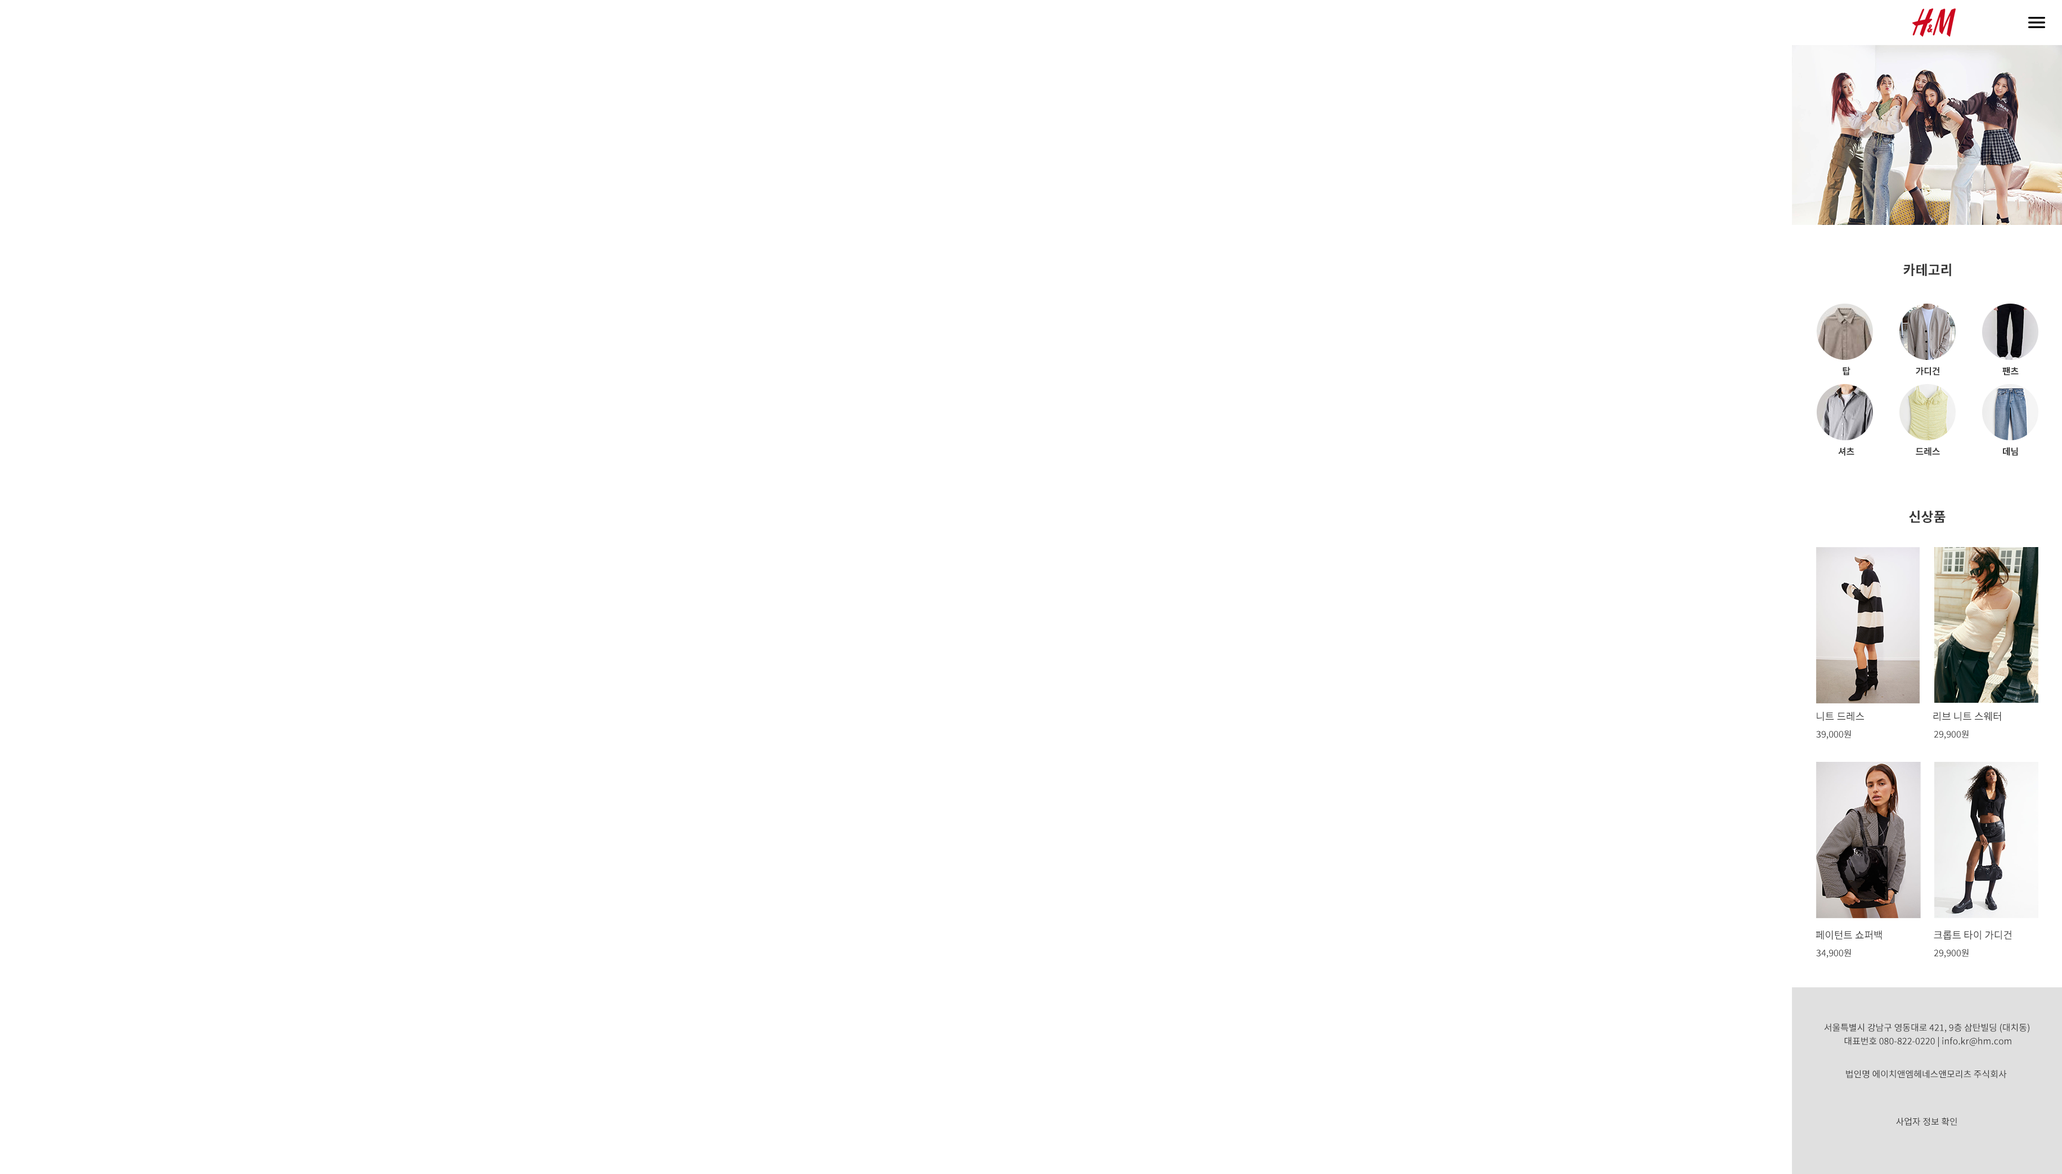
<style>
.page{position:relative;width:2062px;height:1174px;background:#ffffff}
.page>*{position:absolute;margin:0}
.t1{font:13.5px "NotoSansKR-Bold";color:#363636}
.t2{font:9px "NotoSansKR-Bold";color:#363636}
.t3{font:10.1px "NotoSansKR-Regular";color:#363636}
.t4{font:9px "NotoSansKR-Regular";color:#363636}
</style>
<div class="page">
<p class="t1" style="left:1903px;top:263px;width:48px;height:14px">카테고리</p>
<p class="t2" style="left:1842px;top:367px;width:8px;height:9px">탑</p>
<p class="t2" style="left:1915px;top:367px;width:24px;height:9px">가디건</p>
<p class="t2" style="left:2002px;top:367px;width:16px;height:9px">팬츠</p>
<p class="t2" style="left:1838px;top:447px;width:16px;height:9px">셔츠</p>
<p class="t2" style="left:1915px;top:447px;width:25px;height:9px">드레스</p>
<p class="t2" style="left:2002px;top:447px;width:16px;height:9px">데님</p>
<p class="t1" style="left:1909px;top:511px;width:36px;height:12px">신상품</p>
<p class="t3" style="left:1816px;top:712px;width:48px;height:10px">니트 드레스</p>
<p class="t3" style="left:1933px;top:712px;width:68px;height:10px">리브 니트 스웨터</p>
<p class="t4" style="left:1816px;top:730px;width:35px;height:10px">39,000원</p>
<p class="t4" style="left:1933px;top:730px;width:35px;height:10px">29,900원</p>
<p class="t3" style="left:1815px;top:930px;width:67px;height:10px">페이턴트 쇼퍼백</p>
<p class="t3" style="left:1933px;top:930px;width:78px;height:10px">크롭트 타이 가디건</p>
<p class="t4" style="left:1816px;top:949px;width:35px;height:9px">34,900원</p>
<p class="t4" style="left:1933px;top:949px;width:35px;height:9px">29,900원</p>
<p class="t4" style="left:1824px;top:1024px;width:205px;height:23px;text-align:center">서울특별시 강남구 영동대로 421, 9층 삼탄빌딩 (대치동)<br> 대표번호 080-822-0220 | info.kr@hm.com</p>
<p class="t4" style="left:1846px;top:1070px;width:160px;height:9px">법인명 에이치앤엠헤네스앤모리츠 주식회사</p>
<p class="t4" style="left:1896px;top:1118px;width:60px;height:8px">사업자 정보 확인</p>
</div>
